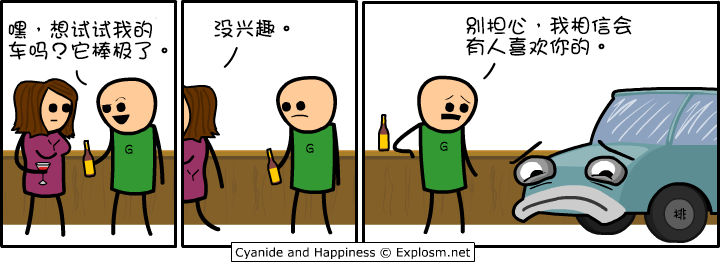
<style>
.page{position:relative;width:721px;height:262px;background:#ffffff}
.page>*{position:absolute;margin:0}
.t1{font:21px/21px "DFGirl";color:#000000}
.t2{font:21px "DFGirl";color:#000000}
.t3{font:14px "DFGirl";color:#000000}
</style>
<div class="page">
<p class="t1" style="left:466px;top:15px;width:166px;height:41px">别担心，我相信会<br>有人喜欢你的。</p>
<p class="t1" style="left:8px;top:20px;width:160px;height:40px">嘿，想试试我的<br>车吗？它棒极了。</p>
<p class="t2" style="left:214px;top:19px;width:76px;height:19px">没兴趣。</p>
<p class="t3" style="left:48px;top:139px;width:13px;height:12px">丫</p>
<p class="t3" style="left:125px;top:144px;width:8px;height:11px">G</p>
<p class="t3" style="left:306px;top:143px;width:8px;height:11px">G</p>
<p class="t3" style="left:440px;top:141px;width:8px;height:11px">G</p>
<p class="t3" style="left:187px;top:169px;width:13px;height:12px">丫</p>
<p class="t3" style="left:673px;top:208px;width:14px;height:12px">排</p>
</div>
